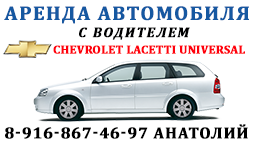
<style>
.page{position:relative;width:255px;height:142px;background:#ffffff}
.page>*{position:absolute;margin:0}
.t1{font:20px "Cambria-Bold";letter-spacing:0.05em;color:#1658a2;text-transform:uppercase;font-weight:bold}
.t2{font:14px "Cambria-BoldItalic";letter-spacing:0.1em;color:#010101;text-transform:uppercase;font-weight:bold}
.t3{font:12px "Cambria-Bold";color:#ff000c;text-transform:uppercase;font-weight:bold}
.t4{font:16px "Cambria-Bold";letter-spacing:0.05em;color:#000000;text-transform:uppercase;font-weight:bold}
</style>
<div class="page">
<p class="t1" style="left:4px;top:6px;width:245px;height:18px">АРЕНДА АВТОМОБИЛЯ</p>
<p class="t2" style="left:79px;top:27px;width:111px;height:13px">с водителем</p>
<p class="t3" style="left:53px;top:45px;width:192px;height:9px">chevrolet lacetti universal</p>
<p class="t4" style="left:5px;top:124px;width:243px;height:15px">8-916-867-46-97 Анатолий</p>
</div>
